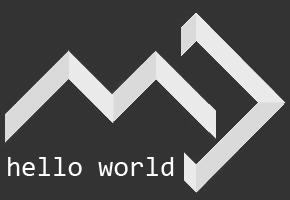
<style>
.page{position:relative;width:290px;height:200px;background:#333333}
.page>*{position:absolute;margin:0}
.t1{font:28px "Consolas";color:#ffffff}
</style>
<div class="page">
<p class="t1" style="left:8px;top:157px;width:166px;height:19px">hello world</p>
</div>
